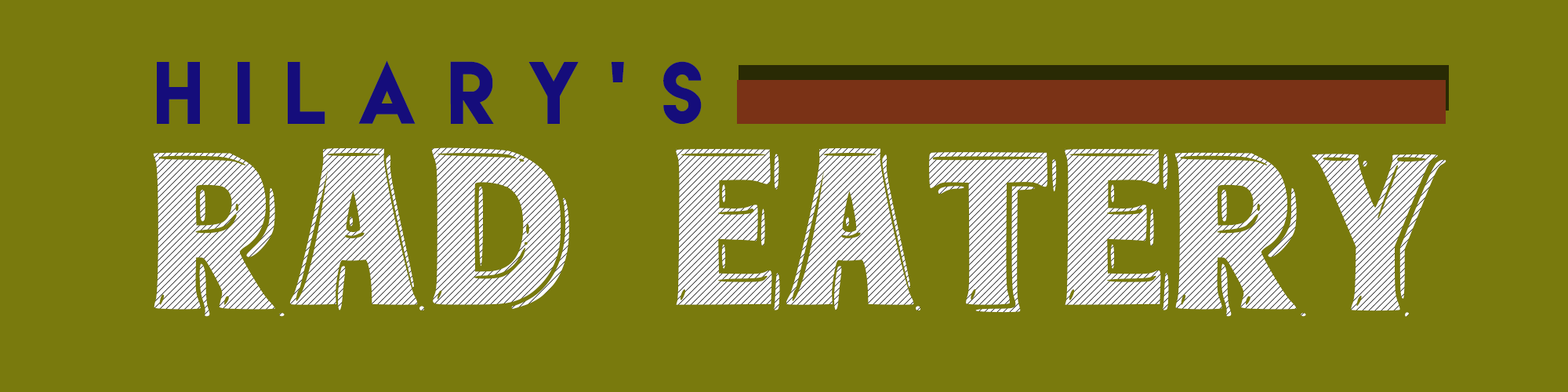
<style>
.page{position:relative;width:1568px;height:392px;background:#797a0d}
.page>*{position:absolute;margin:0}
.t1{font:78.4px "LemonMilk";letter-spacing:0.4em;color:#150d7b}
.t2{font:235.2px "etiquette";letter-spacing:0.005em}
</style>
<div class="page">
<p class="t1" style="left:157px;top:60px;width:545px;height:65px">HILARY’S</p>
<p class="t2" style="left:153px;top:147px;width:1293px;height:170px">RAD EATERY</p>
</div>
